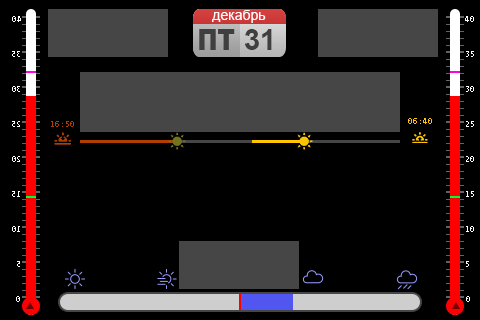
<style>
.page{position:relative;width:480px;height:320px;background:#000000}
.page>*{position:absolute;margin:0}
.t1{font:14px "ArialMT";color:#ffffff}
.t2{font:28.8px "Arial-Black";color:#3f3f3f;scale:0.83 1}
.t3{font:29.2px "Arial-BoldMT";color:#3f3f3f}
.t4{font:8px "AndaleMono";color:#af3e00}
.t5{font:8px "AndaleMono";color:#ffc600}
</style>
<div class="page">
<p class="t1" style="left:212px;top:10px;width:54px;height:13px">декабрь</p>
<p class="t2" style="left:199px;top:29px;width:36px;height:21px">ПТ</p>
<p class="t3" style="left:245px;top:29px;width:27px;height:21px">31</p>
<p class="t4" style="left:51px;top:121px;width:23px;height:6px">16:50</p>
<p class="t5" style="left:408px;top:118px;width:24px;height:6px">06:40</p>
</div>
